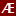
<style>
.page{position:relative;width:16px;height:16px;background:#800000}
.page>*{position:absolute;margin:0}
.t1{font:15px "Optima-Bold";color:#ffffff}
</style>
<div class="page">
<p class="t1" style="left:1px;top:3px;width:14px;height:10px">Æ</p>
</div>
